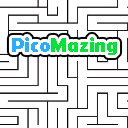
<style>
.page{position:relative;width:128px;height:128px;background:#ffffff}
.page>*{position:absolute;margin:0}
.t1{font:20.8px "BerlinSansFBDemi-Bold";color:#00e436}
.t2{font:20.8px "BerlinSansFBDemi-Bold";color:#29adff}
</style>
<div class="page">
<p class="t1" style="left:12px;top:37px;width:105px;height:18px"><span class="t2">Pico</span>Mazing</p>
</div>
